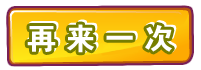
<style>
.page{position:relative;width:201px;height:70px;background:#ffffff}
.page>*{position:absolute;margin:0}
.t1{font:30px "Jdahei";letter-spacing:0.3em;color:#ffffff}
</style>
<div class="page">
<p class="t1" style="left:27px;top:24px;width:145px;height:29px">再来一次</p>
</div>
